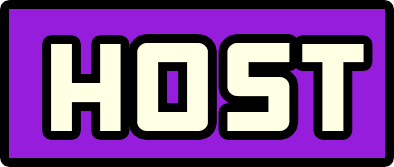
<style>
.page{position:relative;width:394px;height:167px;background:#971ddd}
.page>*{position:absolute;margin:0}
.t1{font:200px "ONRAMP";color:#ffffe3}
</style>
<div class="page">
<p class="t1" style="left:51px;top:43px;width:313px;height:88px">HOST</p>
</div>
